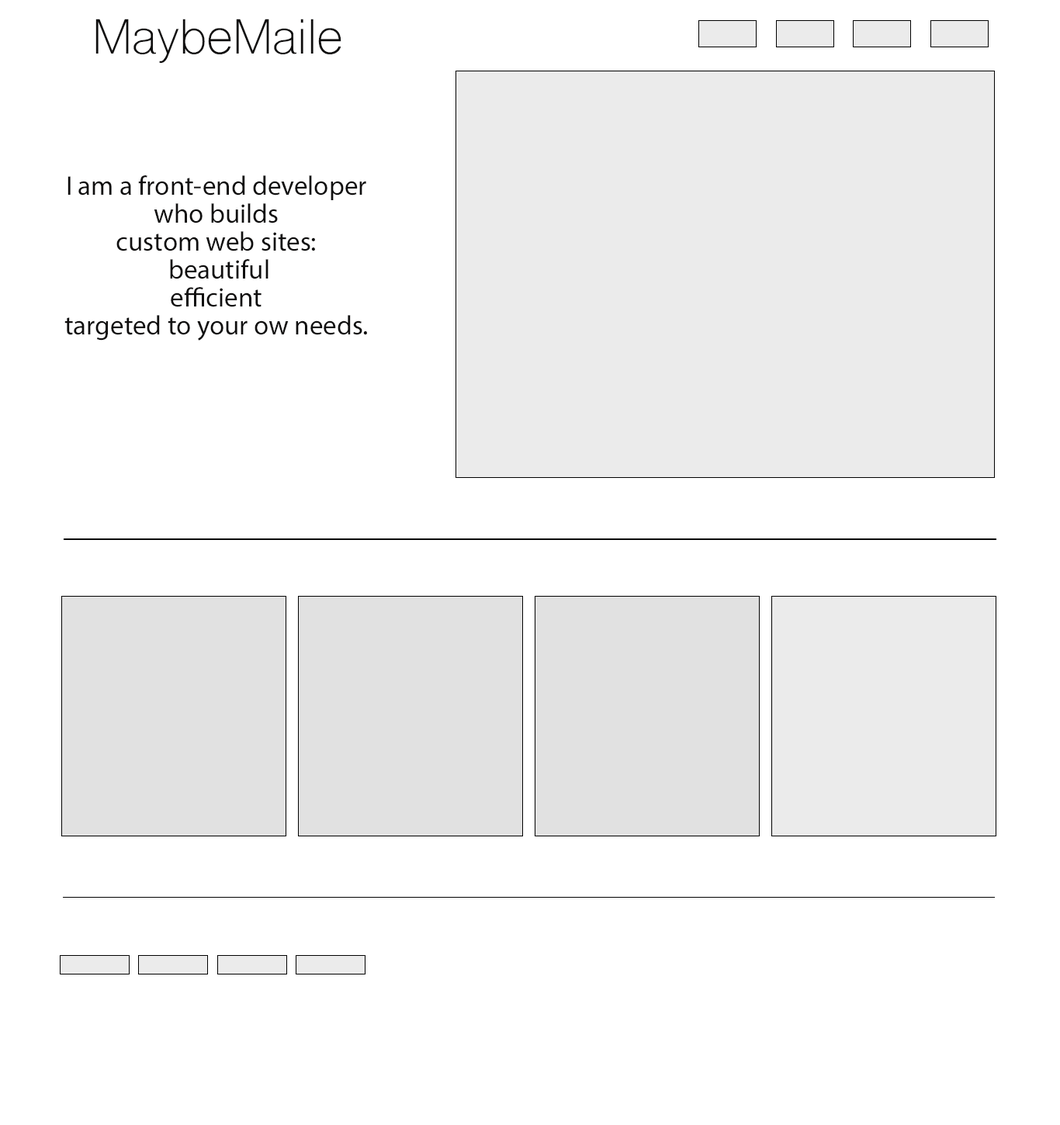
<style>
.page{position:relative;width:1060px;height:1125px;background:#ffffff}
.page>*{position:absolute;margin:0}
.t1{font:46.6px "ShreeDev0714";color:#0f0e0e}
.t2{font:27.2px/27.9px "MyriadPro-Regular";color:#0f0e0e}
</style>
<div class="page">
<p class="t1" style="left:95px;top:19px;width:246px;height:44px">MaybeMaile</p>
<p class="t2" style="left:64px;top:175px;width:303px;height:166px;text-align:center">I am a front-end developer who builds <br>custom web sites:<br> beautiful<br>efficient <br>targeted to your ow needs.</p>
</div>
